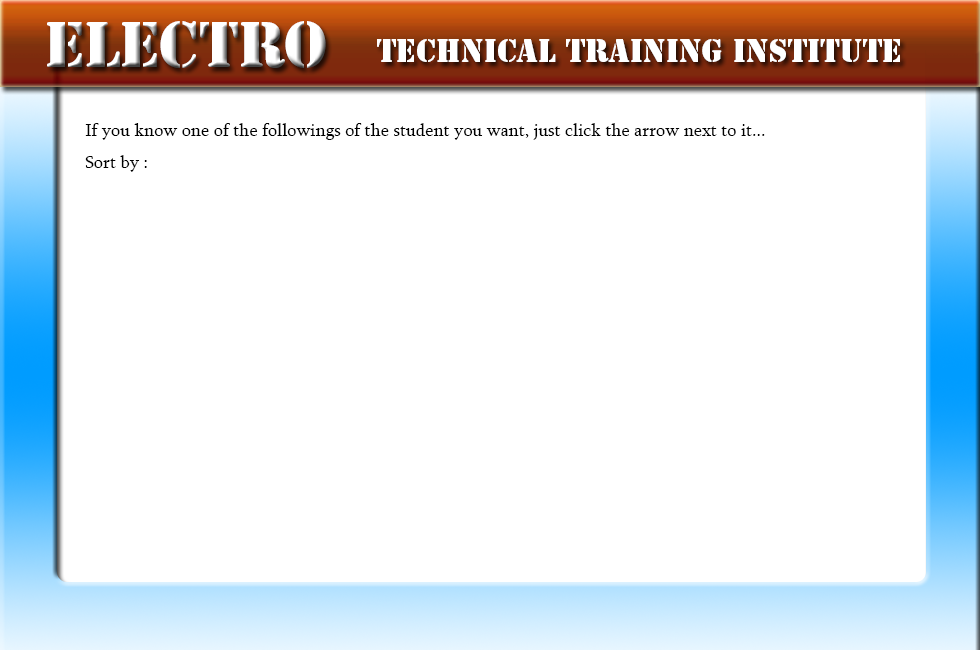
<style>
.page{position:relative;width:980px;height:650px;background:#ffffff}
.page>*{position:absolute;margin:0}
.t1{font:60px "StencilStd";color:#ffffff}
.t2{font:30px "StencilStd";color:#ffffff}
.t3{font:18px "Sylfaen";color:#000000}
</style>
<div class="page">
<p class="t1" style="left:47px;top:21px;width:279px;height:47px">Electro</p>
<p class="t2" style="left:377px;top:39px;width:523px;height:23px">Technical Training Institute</p>
<p class="t3" style="left:85px;top:123px;width:680px;height:17px">If you know one of the followings of the student you want, just click the arrow next to it...</p>
<p class="t3" style="left:85px;top:155px;width:62px;height:17px">Sort by :</p>
</div>
